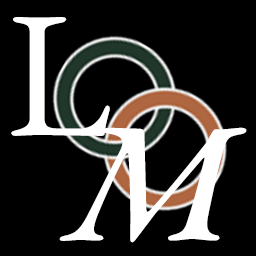
<style>
.page{position:relative;width:256px;height:256px;background:#000000}
.page>*{position:absolute;margin:0}
.t1{font:180.2px "EBGaramond-Regular";letter-spacing:-0.01em;color:#ffffff}
.t2{font:170.2px "EBGaramondItalic-MediumItalic";letter-spacing:-0.01em;color:#ffffff}
</style>
<div class="page">
<p class="t1" style="left:11px;top:17px;width:99px;height:119px">L</p>
<p class="t2" style="left:59px;top:127px;width:188px;height:116px">M</p>
</div>
